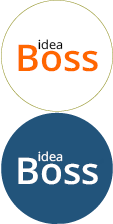
<style>
.page{position:relative;width:113px;height:224px;background:#ffffff}
.page>*{position:absolute;margin:0}
.t1{font:12.4px "OpenSans";color:#000000;scale:1.03 1}
.t2{font:36.9px "OpenSans-Semibold";color:#ff6600}
.t3{font:36.9px "OpenSans-Semibold";color:#ffffff}
.t4{font:12.4px "OpenSans";color:#ffffff;scale:1.03 1}
</style>
<div class="page">
<p class="t1" style="left:38px;top:39px;width:25px;height:11px">idea</p>
<p class="t2" style="left:18px;top:44px;width:80px;height:28px">Boss</p>
<p class="t3" style="left:18px;top:157px;width:80px;height:28px">Boss</p>
<p class="t4" style="left:38px;top:151px;width:25px;height:11px">idea</p>
</div>
